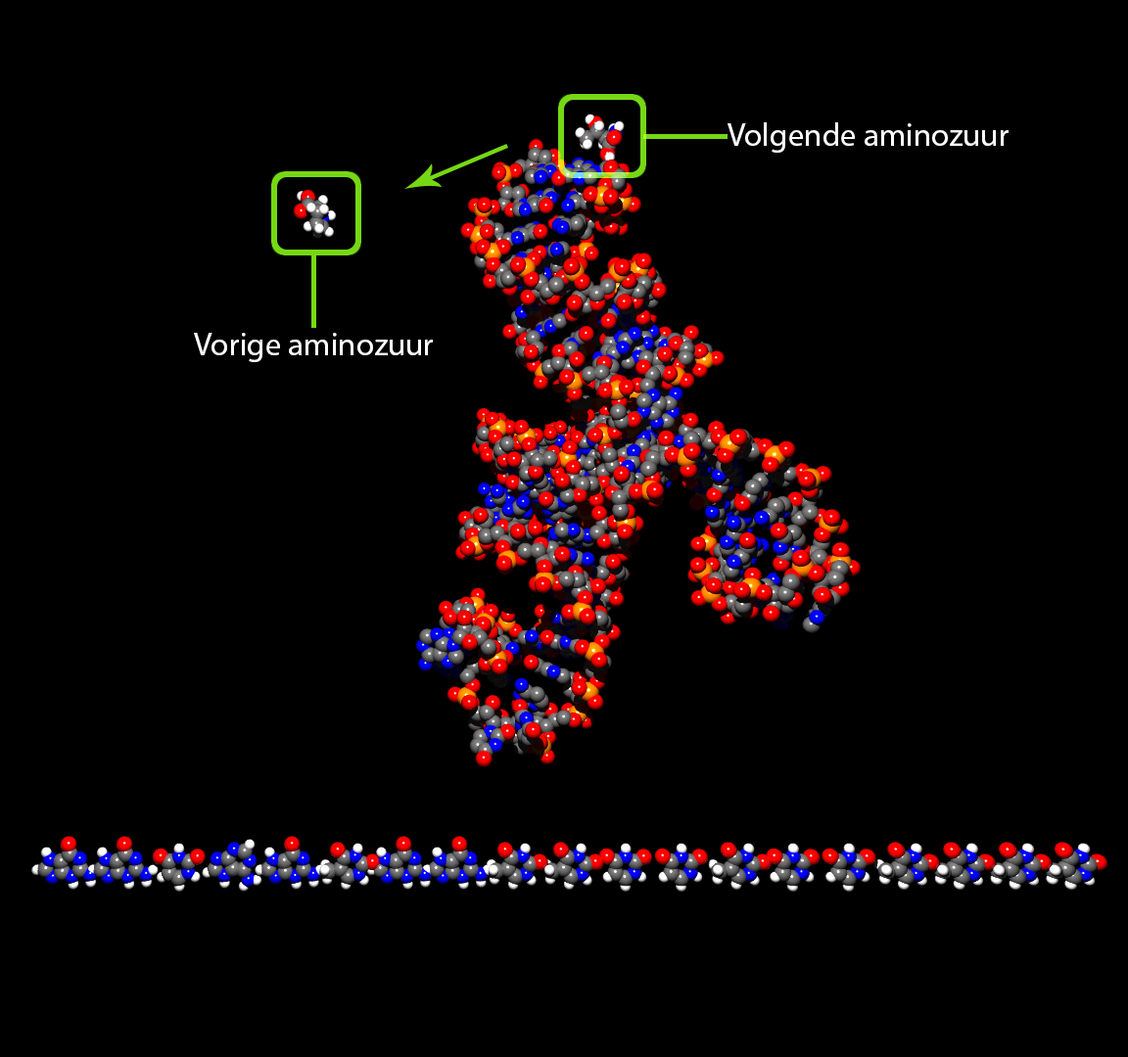
<style>
.page{position:relative;width:1128px;height:1057px;background:#000000}
.page>*{position:absolute;margin:0}
.t1{font:32.3px "MyriadPro-Regular";color:#ffffff}
</style>
<div class="page">
<p class="t1" style="left:727px;top:122px;width:281px;height:31px">Volgende aminozuur</p>
<p class="t1" style="left:194px;top:333px;width:239px;height:29px">Vorige aminozuur</p>
</div>
